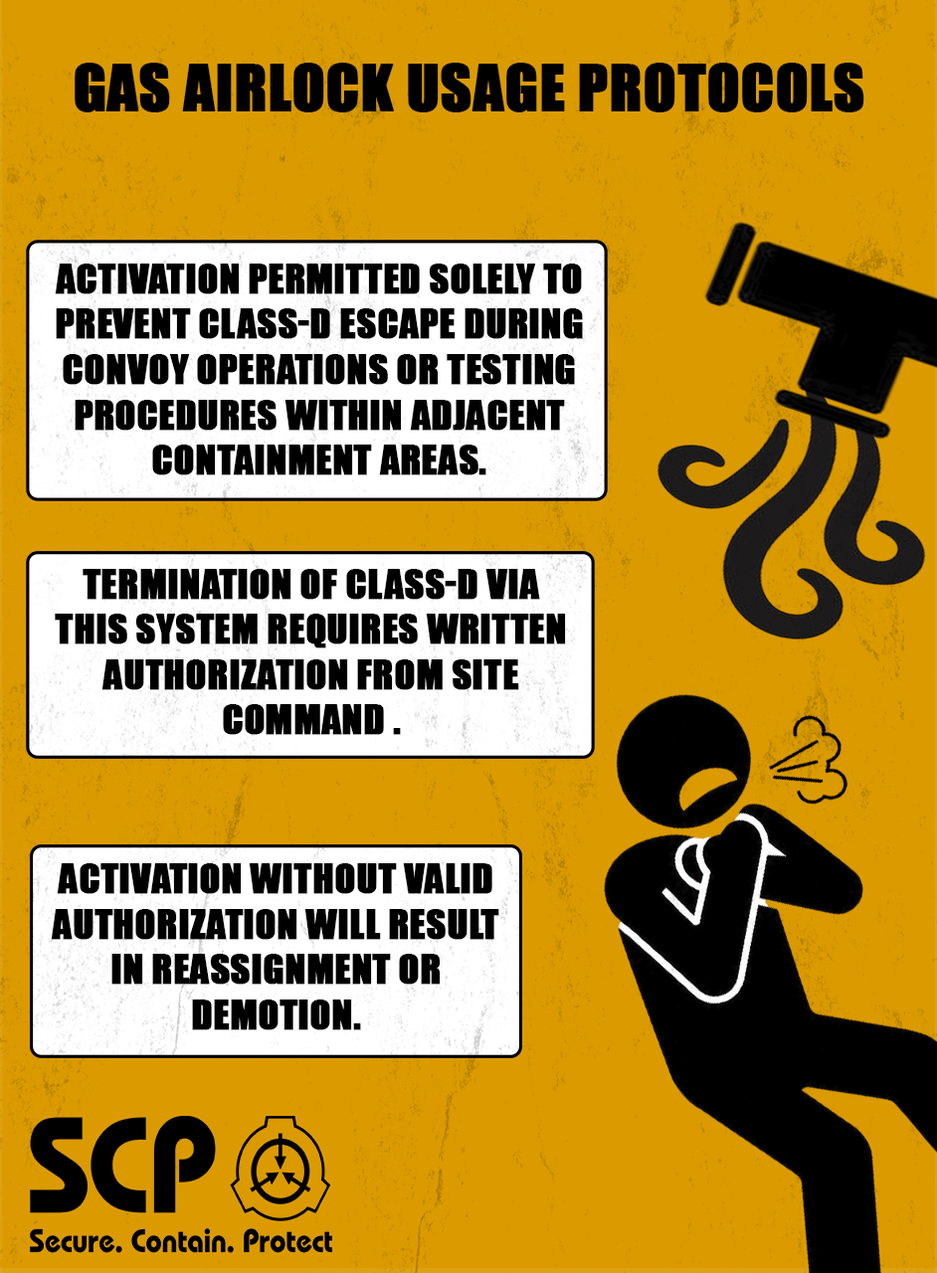
<style>
.page{position:relative;width:937px;height:1273px;background:#db9b00}
.page>*{position:absolute;margin:0}
.t1{font:59.7px "Impact";color:#000000;font-weight:bold}
.t2{font:37.8px "Impact";color:#000000;text-transform:uppercase;font-weight:bold}
.t3{font:29.8px "BauhausC-Light";color:#ffffff;text-transform:uppercase;font-weight:bold}
</style>
<div class="page">
<p class="t1" style="left:75px;top:63px;width:789px;height:49px">GAS AIRLOCK USAGE PROTOCOLS</p>
<p class="t2" style="left:55px;top:264px;width:528px;height:211px;text-align:center">Activation permitted solely to prevent Class-D escape during convoy operations or testing procedures within adjacent containment areas.</p>
<p class="t2" style="left:55px;top:569px;width:511px;height:166px;text-align:center">Termination of Class-D via this system requires written authorization from Site Command .</p>
<p class="t2" style="left:51px;top:863px;width:448px;height:167px;text-align:center"><span class="t3"><br></span>Activation without valid authorization will result in reassignment or demotion.</p>
</div>
